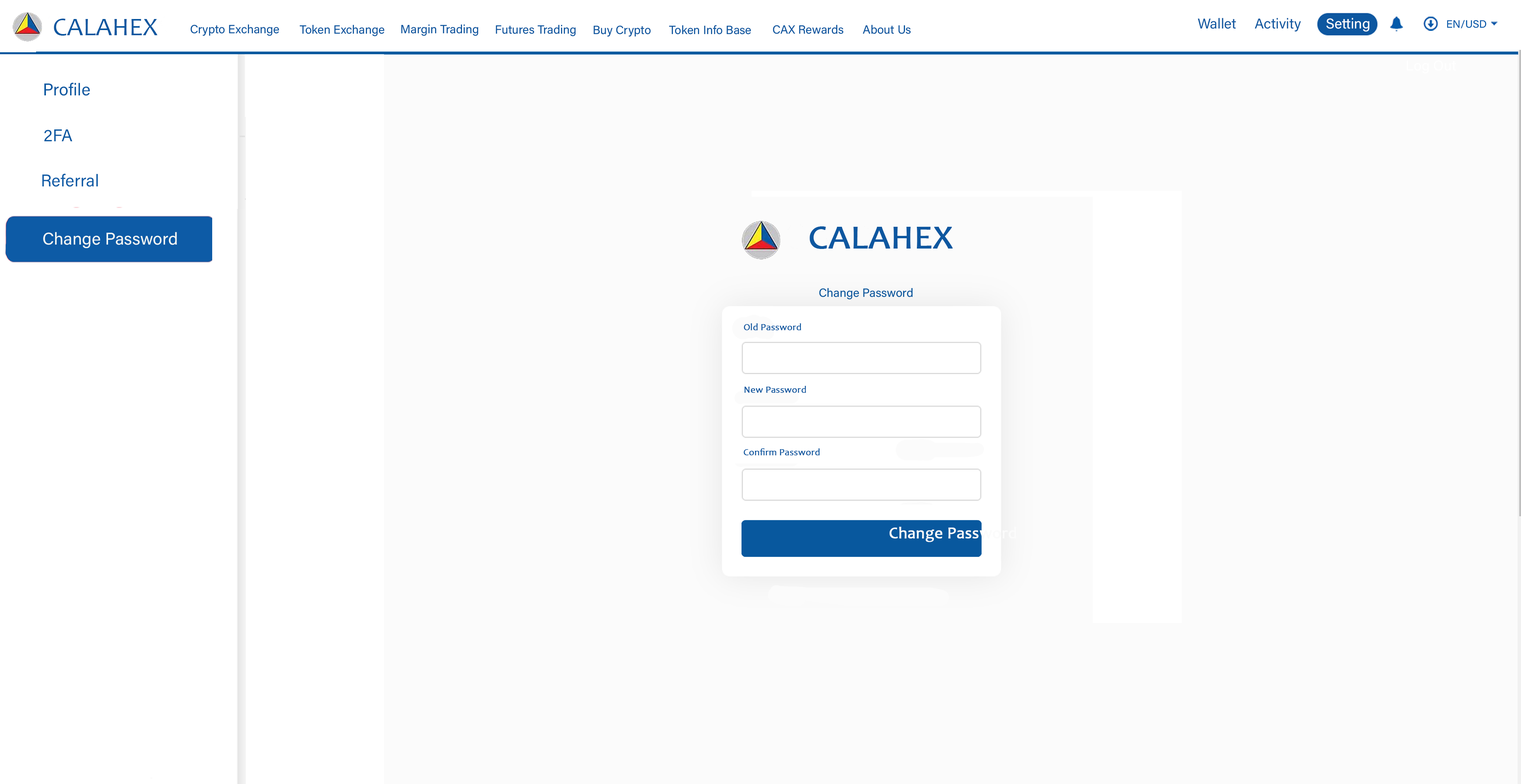
<style>
.page{position:relative;width:1521px;height:784px;background:#fbfbfb}
.page>*{position:absolute;margin:0}
.t1{font:25.6px "Candara";color:#0d57a0}
.t2{font:11.9px "AcuminConcept-Regular";color:#0d57a0;font-style:italic}
.t3{font:10.7px "AcuminConcept-Regular";color:#055aaa;font-style:italic}
.t4{font:17px "AcuminConcept-Regular";color:#0b58a1;font-style:italic}
.t5{font:17px "AcuminConcept-Regular";color:#0d5ba6;font-style:italic}
.t6{font:17px "AcuminConcept-Regular";color:#f5f9f5;font-style:italic}
.t7{font:33.7px "Candara";color:#0d57a0;font-weight:bold}
.t8{font:11.9px "AcuminConcept-Regular";color:#08589e;font-style:italic}
.t9{font:9.5px "Candara";color:#0d57a0;font-weight:bold}
.t10{font:16.2px "Candara";color:#fbfbfb;font-weight:bold}
</style>
<div class="page">
<p class="t1" style="left:54px;top:19px;width:104px;height:17px">CALAHEX</p>
<p class="t2" style="left:190px;top:24px;width:89px;height:12px">Crypto Exchange</p>
<p class="t2" style="left:300px;top:25px;width:84px;height:11px">Token Exchange</p>
<p class="t2" style="left:401px;top:24px;width:77px;height:12px">Margin Trading</p>
<p class="t2" style="left:496px;top:25px;width:80px;height:11px">Futures Trading</p>
<p class="t2" style="left:593px;top:25px;width:58px;height:12px">Buy Crypto</p>
<p class="t2" style="left:669px;top:25px;width:82px;height:9px">Token Info Base</p>
<p class="t2" style="left:773px;top:25px;width:70px;height:9px">CAX Rewards</p>
<p class="t2" style="left:862px;top:25px;width:49px;height:9px">About Us</p>
<p class="t3" style="left:1447px;top:20px;width:39px;height:8px">EN/USD</p>
<p class="t4" style="left:44px;top:83px;width:46px;height:13px">Profile</p>
<p class="t4" style="left:44px;top:129px;width:28px;height:12px">2FA</p>
<p class="t5" style="left:42px;top:174px;width:56px;height:13px">Referral</p>
<p class="t6" style="left:43px;top:232px;width:134px;height:16px">Change Password</p>
<p class="t7" style="left:809px;top:226px;width:144px;height:23px">CALAHEX</p>
<p class="t8" style="left:819px;top:288px;width:93px;height:12px">Change Password</p>
<p class="t9" style="left:744px;top:323px;width:57px;height:8px">Old Password</p>
<p class="t9" style="left:744px;top:386px;width:62px;height:7px">New Password</p>
<p class="t9" style="left:743px;top:448px;width:77px;height:8px">Confirm Password</p>
<p class="t10" style="left:889px;top:527px;width:127px;height:15px">Change Password</p>
</div>
